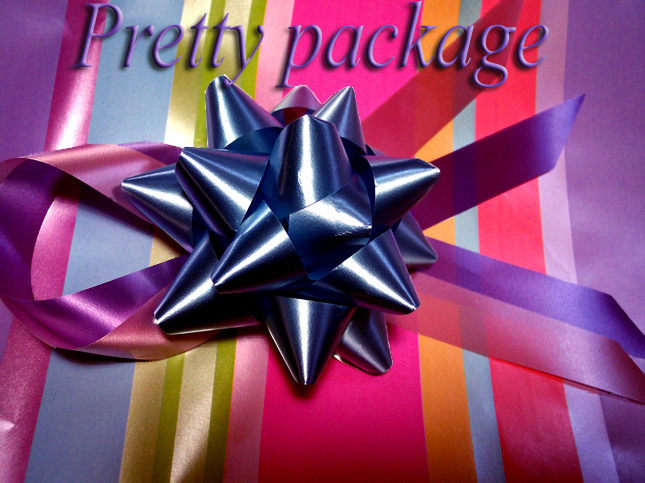
<style>
.page{position:relative;width:645px;height:483px}
.page>*{position:absolute;margin:0}
.t1{font:95.8px "TimesNewRomanPS-ItalicMT";letter-spacing:-0.005em;scale:0.84 1}
</style>
<div class="page">
<p class="t1" style="left:71px;top:0px;width:478px;height:88px">Pretty package</p>
</div>
